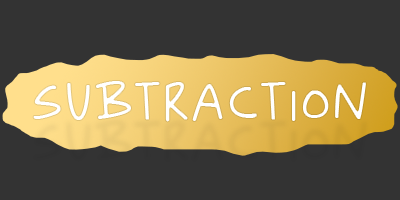
<style>
.page{position:relative;width:400px;height:200px;background:#333333}
.page>*{position:absolute;margin:0}
.t1{font:60px "Childhood"}
</style>
<div class="page">
<p class="t1" style="left:32px;top:80px;width:335px;height:43px">subtraction</p>
</div>
